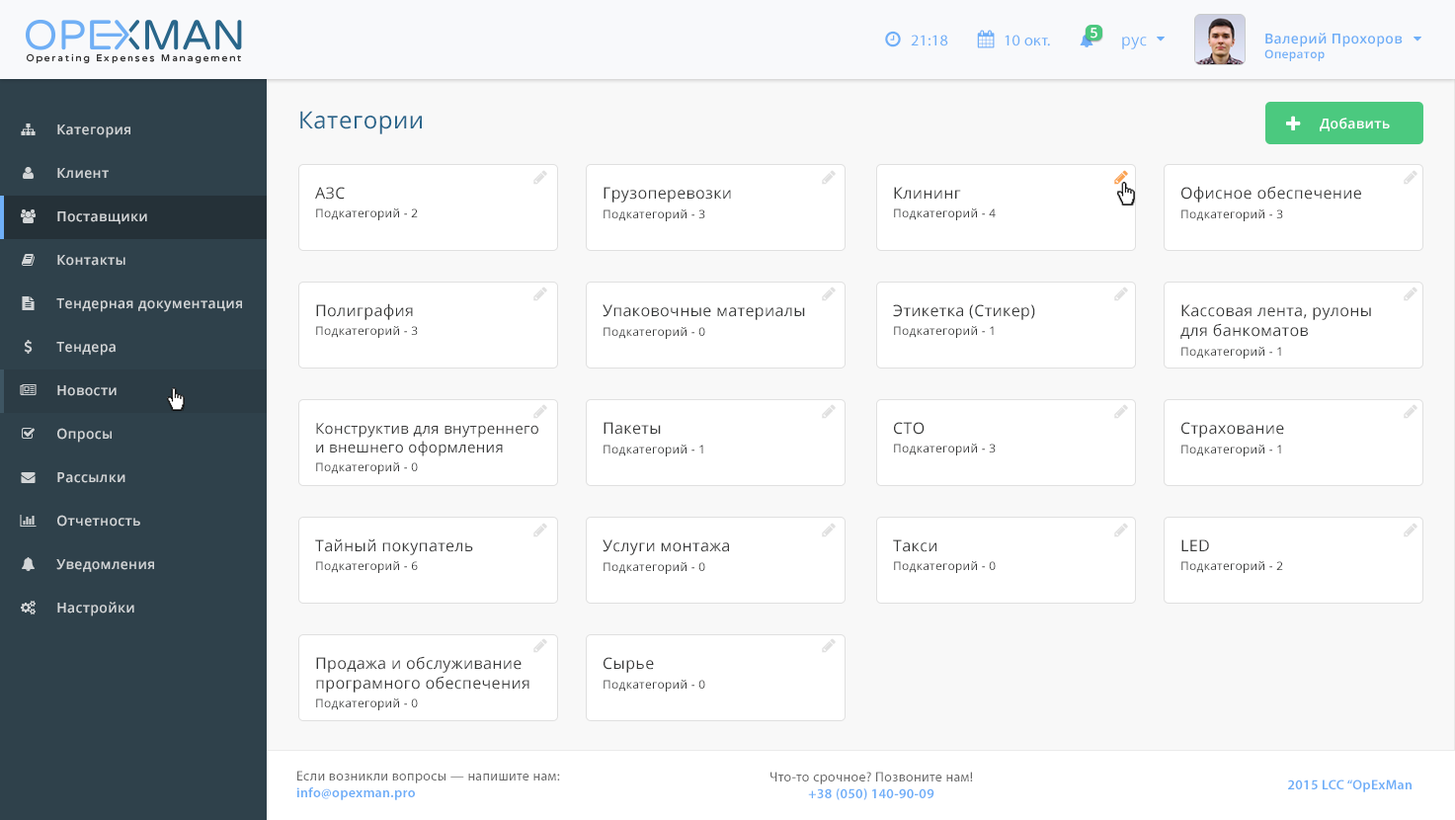
<style>
.page{position:relative;width:1455px;height:820px;background:#ffffff}
.page>*{position:absolute;margin:0}
.t1{font:13.8px "OpenSans-Semibold";letter-spacing:0.025em;color:#ffffff}
.t2{font:15.7px "MyriadPro-Regular";letter-spacing:0.025em;color:#6faff8}
.t3{font:15.7px "OpenSans";letter-spacing:0.025em;color:#6eaff8}
.t4{font:13.8px "OpenSans-Semibold";letter-spacing:0.025em;color:#6eaef7}
.t5{font:11.8px "OpenSans-Semibold";letter-spacing:0.025em;color:#6eaef7}
.t6{font:23.6px "OpenSans";letter-spacing:0.025em;color:#29658b}
.t7{font:13.8px "OpenSans-Semibold";letter-spacing:0.025em;color:#d2d5d7}
.t8{font:15.7px "OpenSans";letter-spacing:0.025em;color:#373838}
.t9{font:11.8px "OpenSans";letter-spacing:0.025em;color:#373838}
.t10{font:14.8px "OpenSans";letter-spacing:0.025em;color:#373838}
.t11{font:13.8px "MyriadPro-Regular";letter-spacing:0.025em;color:#696969}
.t12{font:13.8px "MyriadPro-Semibold";letter-spacing:0.025em;color:#6eaef8}
</style>
<div class="page">
<p class="t1" style="left:1090px;top:28px;width:7px;height:11px">5</p>
<p class="t2" style="left:911px;top:35px;width:37px;height:11px">21:18</p>
<p class="t2" style="left:1004px;top:35px;width:46px;height:11px">10 окт.</p>
<p class="t3" style="left:1122px;top:37px;width:25px;height:12px">рус</p>
<p class="t4" style="left:1264px;top:33px;width:138px;height:28px">Валерий Прохоров<br><span class="t5">Оператор</span></p>
<p class="t6" style="left:300px;top:111px;width:122px;height:23px">Категории</p>
<p class="t7" style="left:57px;top:124px;width:73px;height:14px">Категория</p>
<p class="t1" style="left:1319px;top:118px;width:71px;height:13px">Добавить</p>
<p class="t7" style="left:57px;top:168px;width:52px;height:11px">Клиент</p>
<p class="t8" style="left:1181px;top:186px;width:180px;height:16px">Офисное обеспечение</p>
<p class="t8" style="left:315px;top:187px;width:30px;height:12px">АЗС</p>
<p class="t8" style="left:603px;top:187px;width:128px;height:15px">Грузоперевозки</p>
<p class="t8" style="left:894px;top:187px;width:67px;height:12px">Клининг</p>
<p class="t9" style="left:316px;top:208px;width:102px;height:12px">Подкатегорий - 2</p>
<p class="t9" style="left:603px;top:209px;width:102px;height:12px">Подкатегорий - 3</p>
<p class="t9" style="left:894px;top:208px;width:101px;height:12px">Подкатегорий - 4</p>
<p class="t9" style="left:1181px;top:209px;width:102px;height:12px">Подкатегорий - 3</p>
<p class="t7" style="left:57px;top:211px;width:90px;height:13px">Поставщики</p>
<p class="t7" style="left:57px;top:255px;width:68px;height:11px">Контакты</p>
<p class="t7" style="left:56px;top:298px;width:186px;height:14px">Тендерная документация</p>
<p class="t8" style="left:316px;top:303px;width:97px;height:17px">Полиграфия</p>
<p class="t8" style="left:602px;top:304px;width:203px;height:16px">Упаковочные материалы</p>
<p class="t8" style="left:893px;top:304px;width:142px;height:16px">Этикетка (Стикер)</p>
<p class="t8" style="left:1180px;top:304px;width:191px;height:35px">Кассовая лента, рулоны <br>для банкоматов</p>
<p class="t9" style="left:316px;top:326px;width:102px;height:12px">Подкатегорий - 3</p>
<p class="t9" style="left:603px;top:327px;width:102px;height:12px">Подкатегорий - 0</p>
<p class="t9" style="left:894px;top:326px;width:100px;height:12px">Подкатегорий - 1</p>
<p class="t7" style="left:56px;top:342px;width:60px;height:14px">Тендера</p>
<p class="t9" style="left:1181px;top:347px;width:100px;height:11px">Подкатегорий - 1</p>
<p class="t7" style="left:57px;top:385px;width:60px;height:11px">Новости</p>
<p class="t10" style="left:316px;top:423px;width:222px;height:33px">Конструктив для внутреннего <br>и внешнего оформления</p>
<p class="t8" style="left:603px;top:422px;width:58px;height:13px">Пакеты</p>
<p class="t8" style="left:894px;top:422px;width:30px;height:13px">СТО</p>
<p class="t8" style="left:1181px;top:422px;width:103px;height:16px">Страхование</p>
<p class="t7" style="left:57px;top:428px;width:55px;height:14px">Опросы</p>
<p class="t9" style="left:603px;top:444px;width:100px;height:12px">Подкатегорий - 1</p>
<p class="t9" style="left:894px;top:443px;width:101px;height:12px">Подкатегорий - 3</p>
<p class="t9" style="left:1181px;top:444px;width:100px;height:12px">Подкатегорий - 1</p>
<p class="t7" style="left:57px;top:472px;width:68px;height:11px">Рассылки</p>
<p class="t9" style="left:316px;top:462px;width:102px;height:12px">Подкатегорий - 0</p>
<p class="t7" style="left:57px;top:515px;width:83px;height:11px">Отчетность</p>
<p class="t8" style="left:315px;top:538px;width:158px;height:17px">Тайный покупатель</p>
<p class="t8" style="left:602px;top:539px;width:127px;height:16px">Услуги монтажа</p>
<p class="t8" style="left:893px;top:539px;width:43px;height:13px">Такси</p>
<p class="t8" style="left:1181px;top:539px;width:28px;height:12px">LED</p>
<p class="t7" style="left:56px;top:559px;width:98px;height:13px">Уведомления</p>
<p class="t9" style="left:316px;top:561px;width:102px;height:12px">Подкатегорий - 6</p>
<p class="t9" style="left:603px;top:562px;width:102px;height:12px">Подкатегорий - 0</p>
<p class="t9" style="left:894px;top:561px;width:101px;height:12px">Подкатегорий - 0</p>
<p class="t9" style="left:1181px;top:561px;width:102px;height:12px">Подкатегорий - 2</p>
<p class="t7" style="left:57px;top:601px;width:77px;height:15px">Настройки</p>
<p class="t8" style="left:316px;top:656px;width:213px;height:36px">Продажа и обслуживание <br>програмного обеспечения</p>
<p class="t8" style="left:603px;top:657px;width:51px;height:16px">Сырье</p>
<p class="t9" style="left:603px;top:679px;width:102px;height:12px">Подкатегорий - 0</p>
<p class="t9" style="left:316px;top:698px;width:102px;height:12px">Подкатегорий - 0</p>
<p class="t11" style="left:296px;top:770px;width:264px;height:30px">Если возникли вопросы — напишите нам:<br><span class="t12">info@opexman.pro</span></p>
<p class="t11" style="left:770px;top:771px;width:203px;height:29px;text-align:center">Что-то срочное? Позвоните нам!<br><span class="t12">+38 (050) 140-90-09</span></p>
<p class="t12" style="left:1288px;top:779px;width:123px;height:13px">2015 LCC “OpExMan</p>
</div>
